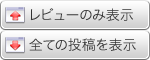
<style>
.page{position:relative;width:150px;height:60px}
.page>*{position:absolute;margin:0}
.t1{font:14px "HiraKakuPro-W3";color:#333333}
</style>
<div class="page">
<p class="t1" style="left:30px;top:8px;width:103px;height:13px">レビューのみ表示</p>
<p class="t1" style="left:29px;top:38px;width:107px;height:13px">全ての投稿を表示</p>
</div>
